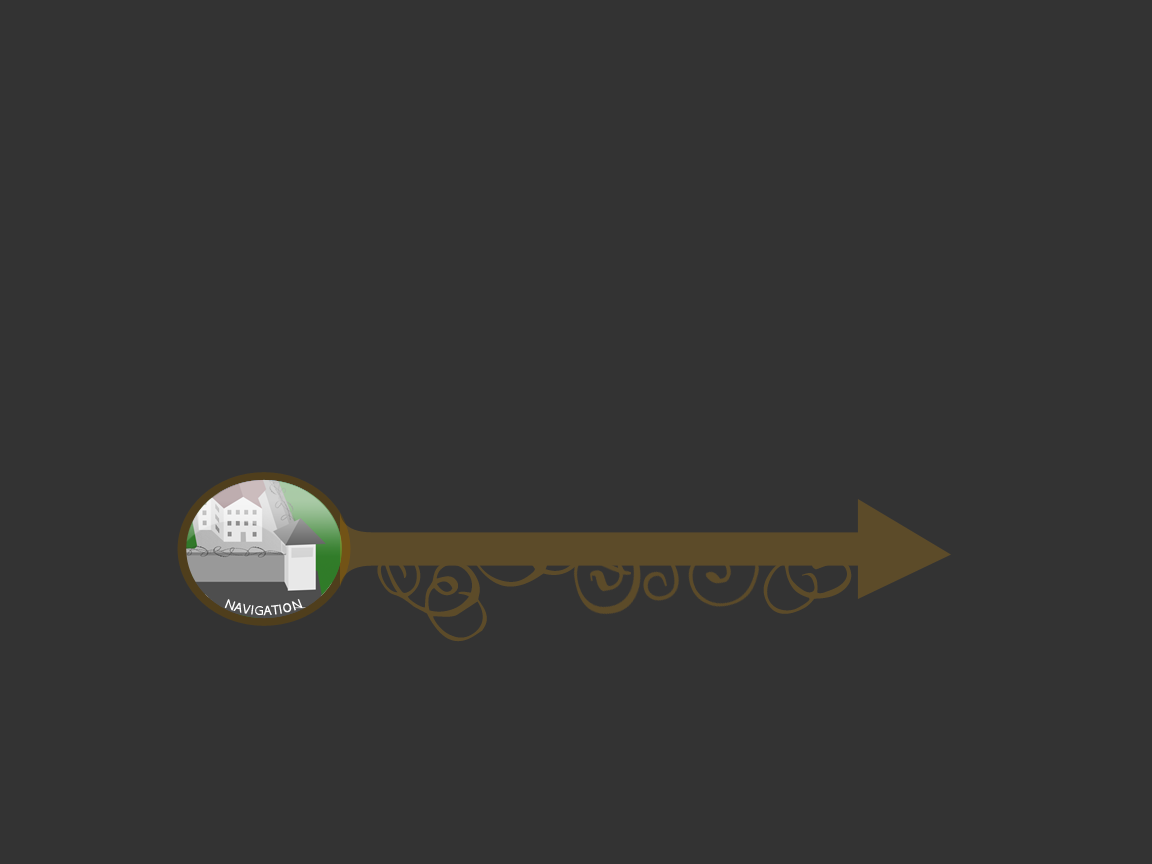
<style>
.page{position:relative;width:1152px;height:864px;background:#333333}
.page>*{position:absolute;margin:0}
.t1{font:13px "MyriadWebPro";color:#ffffff}
</style>
<div class="page">
<p class="t1" style="left:224px;top:599px;width:79px;height:17px">NAVIGATION</p>
</div>
